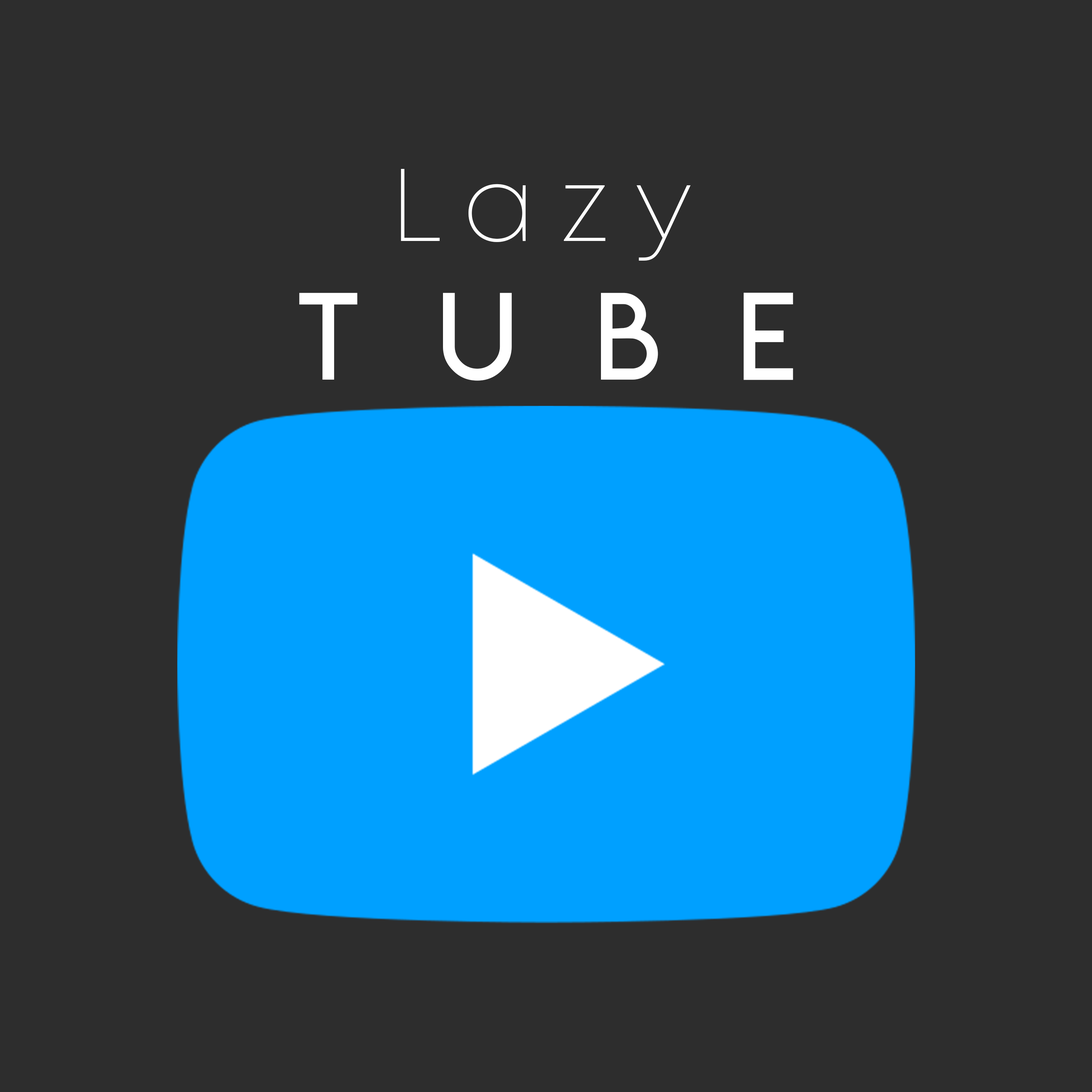
<style>
.page{position:relative;width:1092px;height:1092px;background:#2d2d2d}
.page>*{position:absolute;margin:0}
.t1{font:102.9px "Mont-ExtraLightDEMO";letter-spacing:0.25em;color:#ffffff}
.t2{font:119.4px "LemonMilklight";letter-spacing:0.65em;color:#ffffff}
</style>
<div class="page">
<p class="t1" style="left:401px;top:169px;width:289px;height:92px">Lazy</p>
<p class="t2" style="left:299px;top:293px;width:494px;height:88px">TUBE</p>
</div>
